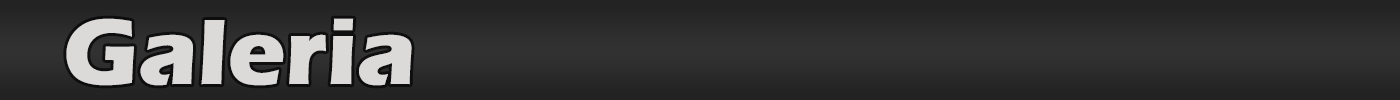
<style>
.page{position:relative;width:1400px;height:100px}
.page>*{position:absolute;margin:0}
.t1{font:96px "ErasITC-Bold";color:#dcd9d9}
</style>
<div class="page">
<p class="t1" style="left:66px;top:18px;width:346px;height:68px">Galeria</p>
</div>
